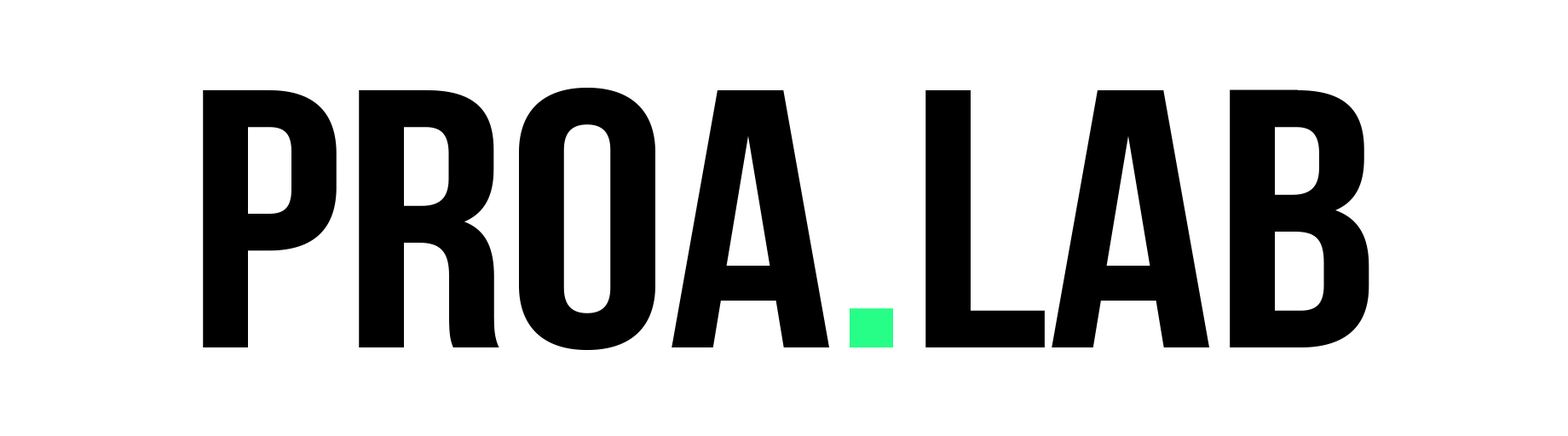
<style>
.page{position:relative;width:1568px;height:436px;background:#ffffff}
.page>*{position:absolute;margin:0}
.t1{font:368.1px "BebasNeueBold";color:#000000;scale:1.11 1}
.t2{font:368.1px "BebasNeueBold";color:#27fe87;scale:1.11 1}
</style>
<div class="page">
<p class="t1" style="left:203px;top:87px;width:1166px;height:263px">Proa<span class="t2">.</span>Lab</p>
</div>
